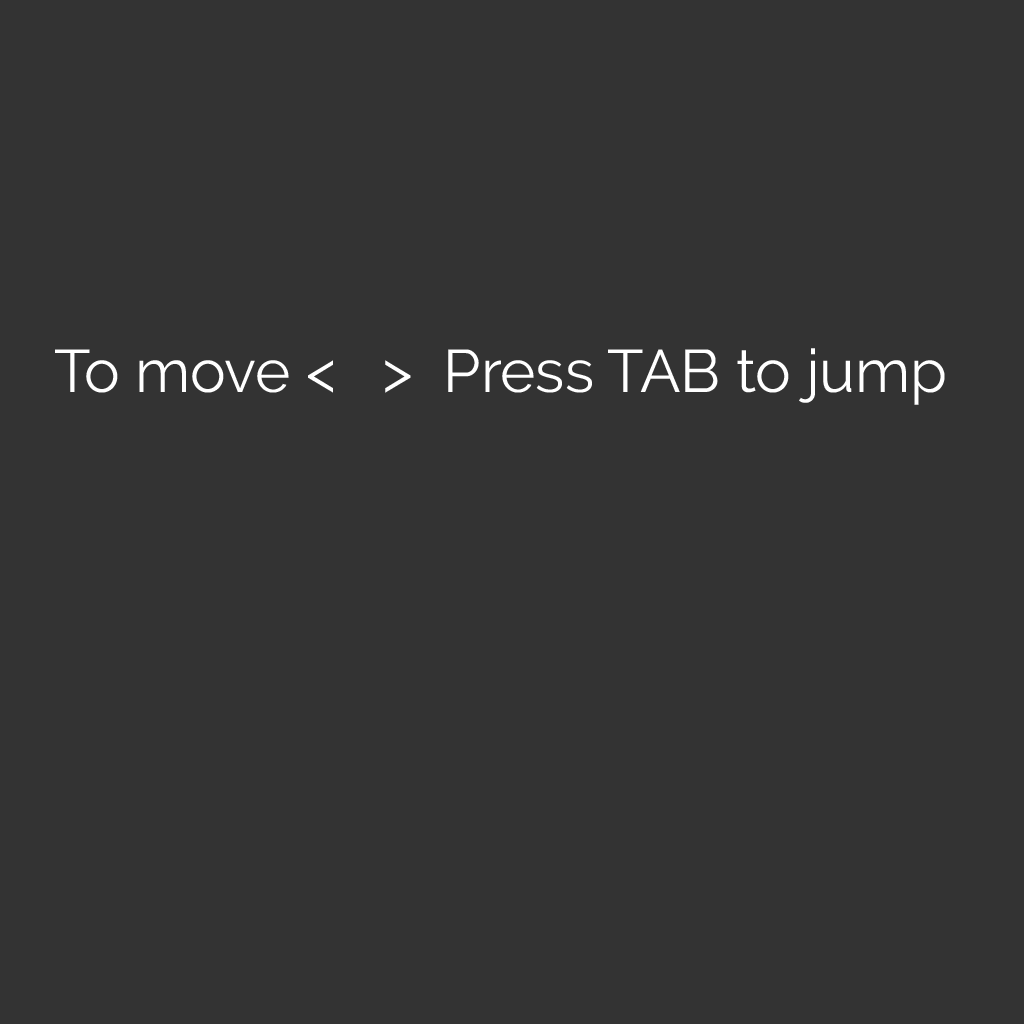
<style>
.page{position:relative;width:1024px;height:1024px;background:#333333}
.page>*{position:absolute;margin:0}
.t1{font:60px "Raleway-Regular";color:#ffffff}
</style>
<div class="page">
<p class="t1" style="left:55px;top:348px;width:890px;height:57px">To move &lt;   &gt;  Press TAB to jump</p>
</div>
